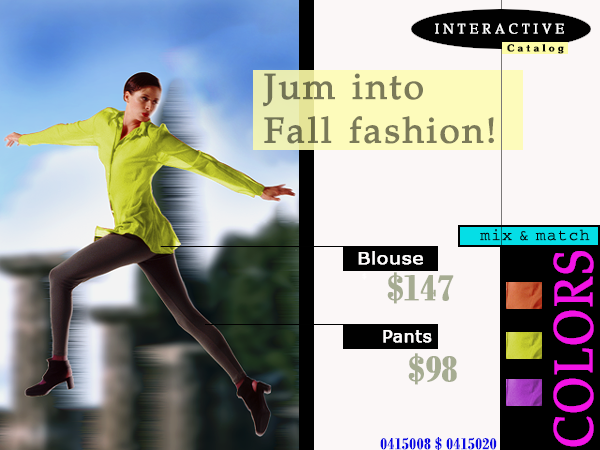
<style>
.page{position:relative;width:600px;height:450px;background:#fbf7f7}
.page>*{position:absolute;margin:0}
.t1{font:23.1px "VNI-Palatin";letter-spacing:0.3em;color:#ffffff;font-weight:bold;scale:0.93 1}
.t2{font:16.7px "VNI-Souvir-Bold";letter-spacing:0.3em;color:#010101;font-weight:bold}
.t3{font:61.7px/43.9px "VNI-Palatin";letter-spacing:0.04em;color:#7b7a59;font-weight:bold}
.t4{font:24px "VNI-Couri";letter-spacing:0.05em;color:#030303;font-weight:bold}
.t5{font:30px "Verdana";color:#fffdfd;font-weight:bold;scale:1.1 1}
.t6{font:92.7px "VNI-Palatin";letter-spacing:0.05em;color:#f213e5;font-weight:bold;scale:0.81 1}
.t7{font:10.9px "Verdana";color:#fffdfd;font-weight:bold}
.t8{font:68.7px "VnBodoniBold";color:#a6ac92;font-weight:bold}
.t9{font:30px "Verdana";color:#fffdfd;font-weight:bold}
.t10{font:30px "VnBodoniBold";color:#0b0be4;font-weight:bold}
</style>
<div class="page">
<p class="t1" style="left:435px;top:23px;width:129px;height:11px">INTERACTIVE</p>
<p class="t2" style="left:507px;top:44px;width:57px;height:10px">Catalog</p>
<p class="t3" style="left:263px;top:73px;width:231px;height:71px">Jum into<br>Fall fashion!</p>
<p class="t4" style="left:480px;top:229px;width:110px;height:12px">mix &amp; match</p>
<p class="t5" style="left:358px;top:251px;width:65px;height:14px">Blouse</p>
<p class="t6" style="left:553px;top:251px;width:41px;height:196px;rotate:-90deg">COLORS</p>
<p class="t7" style="left:362px;top:272px;width:5px;height:8px">$</p>
<p class="t8" style="left:387px;top:272px;width:67px;height:32px">$147</p>
<p class="t9" style="left:383px;top:330px;width:49px;height:13px">Pants</p>
<p class="t8" style="left:408px;top:353px;width:49px;height:32px">$98</p>
<p class="t10" style="left:380px;top:437px;width:117px;height:14px">0415008 $ 0415020</p>
</div>
